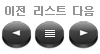
<style>
.page{position:relative;width:100px;height:54px;background:#ffffff}
.page>*{position:absolute;margin:0}
.t1{font:11px "Dotum";letter-spacing:-0.075em;color:#949494;font-weight:bold}
</style>
<div class="page">
<p class="t1" style="left:5px;top:6px;width:20px;height:10px">이전</p>
<p class="t1" style="left:34px;top:6px;width:32px;height:10px">리스트</p>
<p class="t1" style="left:73px;top:6px;width:21px;height:10px">다음</p>
</div>
